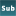
<style>
.page{position:relative;width:16px;height:16px}
.page>*{position:absolute;margin:0}
.t1{font:7.5px "Calibri-Bold";letter-spacing:0.08em;color:#ffffff}
</style>
<div class="page">
<p class="t1" style="left:1px;top:5px;width:14px;height:6px">Sub</p>
</div>
